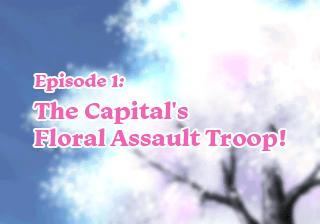
<style>
.page{position:relative;width:320px;height:224px}
.page>*{position:absolute;margin:0}
.t1{font:24px/27px "Monarcha-Bold";color:#ef63b5}
.t2{font:18px/30px "Monarcha-Bold";color:#ef63b5}
.t3{font:24px/32px "Monarcha-Bold";color:#ef63b5}
</style>
<div class="page">
<p class="t1" style="left:34px;top:73px;width:252px;height:78px"><span class="t2">Episode 1:<br></span><span class="t3">The Capital's <br></span>Floral Assault Troop!</p>
</div>
